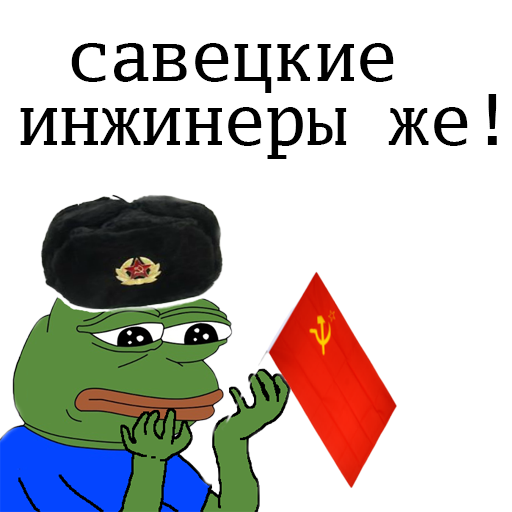
<style>
.page{position:relative;width:512px;height:512px;background:#ffffff}
.page>*{position:absolute;margin:0}
.t1{font:68.5px "GoMonoForPowerline";color:#000000}
.t2{font:68.6px "GoMonoForPowerline";color:#000000}
</style>
<div class="page">
<p class="t1" style="left:71px;top:43px;width:323px;height:50px">савецкие</p>
<p class="t2" style="left:20px;top:94px;width:477px;height:65px">инжинеры же!</p>
</div>
